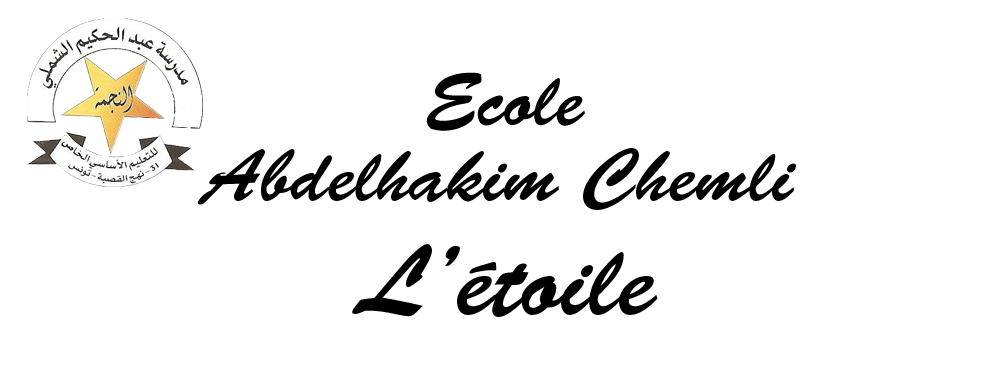
<style>
.page{position:relative;width:1000px;height:374px;background:#ffffff}
.page>*{position:absolute;margin:0}
.t1{font:75px "BrushScriptStd";color:#000000}
.t2{font:100px "BrushScriptStd";color:#000000}
</style>
<div class="page">
<p class="t1" style="left:426px;top:72px;width:159px;height:59px">Ecole</p>
<p class="t1" style="left:197px;top:148px;width:599px;height:62px">Abdelhakim Chemli</p>
<p class="t2" style="left:352px;top:244px;width:306px;height:73px">L’étoile</p>
</div>
